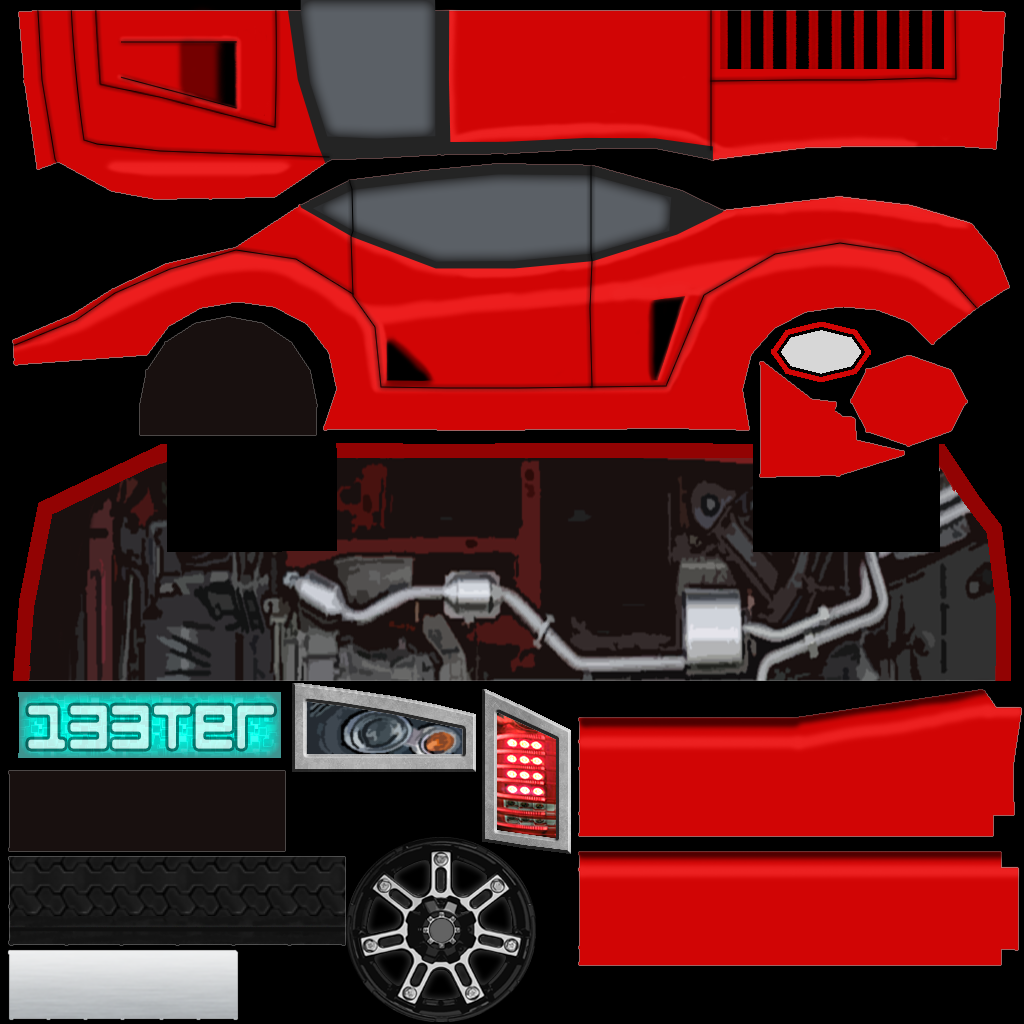
<style>
.page{position:relative;width:1024px;height:1024px;background:#000000}
.page>*{position:absolute;margin:0}
.t1{font:76.2px "LuggageRoundRegular";color:#b8f6ee;scale:0.85 1}
</style>
<div class="page">
<p class="t1" style="left:28px;top:705px;width:246px;height:44px">133ter</p>
</div>
